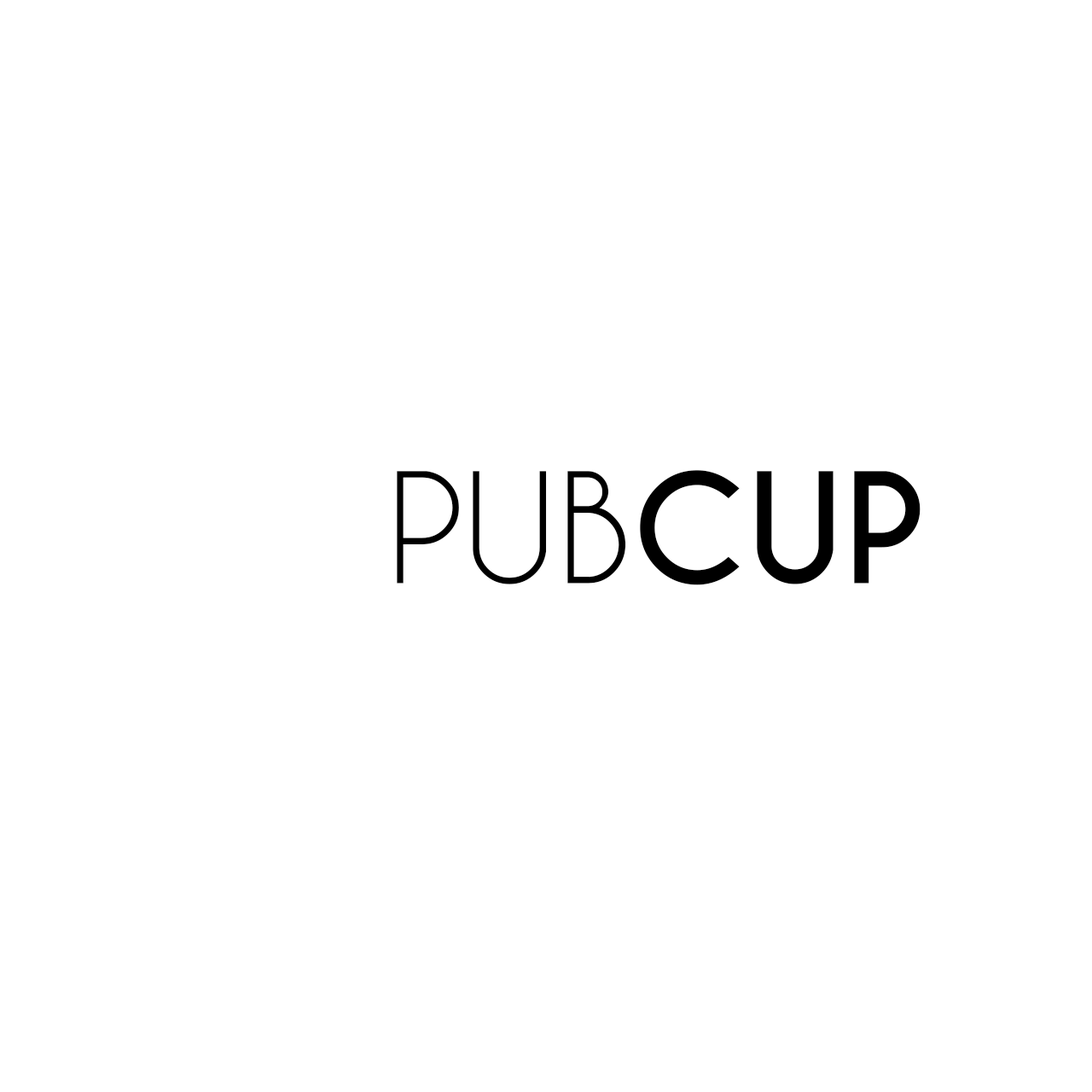
<style>
.page{position:relative;width:1092px;height:1092px;background:#ffffff}
.page>*{position:absolute;margin:0}
.t1{font:143.4px "CaviarDreams";color:#000000}
.t2{font:143.4px "CaviarDreams-Bold";color:#000000}
</style>
<div class="page">
<p class="t1" style="left:397px;top:470px;width:524px;height:115px">PUB<span class="t2">CUP</span></p>
</div>
